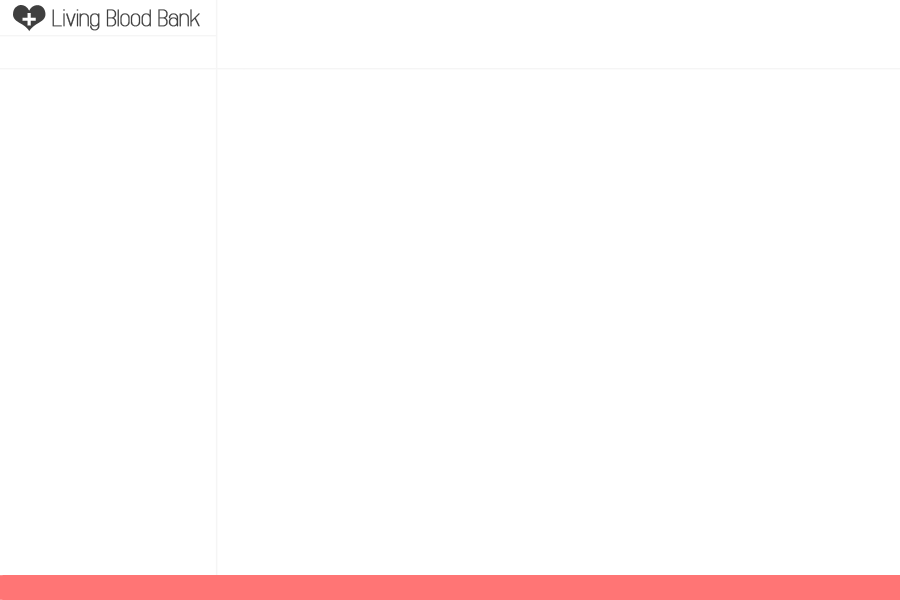
<style>
.page{position:relative;width:900px;height:600px;background:#ffffff}
.page>*{position:absolute;margin:0}
.t1{font:28.2px "LeagueGothic-Regular";letter-spacing:-0.02em;color:#ffffff;font-weight:bold}
.t2{font:23.5px "Infinity";letter-spacing:-0.02em;color:#3f3f3f;font-weight:bold}
</style>
<div class="page">
<p class="t1" style="left:22px;top:13px;width:14px;height:13px">+</p>
<p class="t2" style="left:52px;top:9px;width:148px;height:22px">Living Blood Bank</p>
</div>
